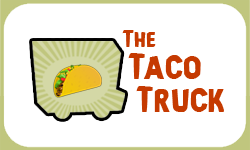
<style>
.page{position:relative;width:250px;height:150px;background:#ffffff}
.page>*{position:absolute;margin:0}
.t1{font:36.7px/32.7px "Bronic";color:#c53a01}
.t2{font:24.5px/32.7px "Bronic";color:#c53a01}
.t3{font:36.7px/32.7px "Bronic";letter-spacing:-0.075em;color:#c53a01}
</style>
<div class="page">
<p class="t1" style="left:122px;top:30px;width:102px;height:82px"><span class="t2">The<br> </span><span class="t3">T</span>aco<br>  Truck</p>
</div>
